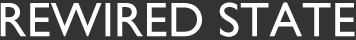
<style>
.page{position:relative;width:356px;height:40px;background:#333333}
.page>*{position:absolute;margin:0}
.t1{font:48.7px "GillSans";color:#ffffff}
</style>
<div class="page">
<p class="t1" style="left:0px;top:2px;width:355px;height:35px">REWIRED STATE</p>
</div>
